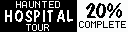
<style>
.page{position:relative;width:128px;height:32px;background:#000000}
.page>*{position:absolute;margin:0}
.t1{font:8px "Terminal";letter-spacing:0.075em;color:#ffffff}
.t2{font:24px "DomCasualBT-Regular";color:#000000}
.t3{font:17.2px "DomCasualBT-Regular";letter-spacing:0.05em;color:#ffffff;scale:1.05 1}
.t4{font:8px "Terminal";color:#ffffff}
.t5{font:8px "Terminal";color:#000000}
</style>
<div class="page">
<p class="t1" style="left:16px;top:1px;width:44px;height:7px">HAUNTED</p>
<p class="t2" style="left:86px;top:3px;width:36px;height:15px">20%</p>
<p class="t3" style="left:5px;top:10px;width:68px;height:12px">HOSPITAL</p>
<p class="t4" style="left:26px;top:24px;width:23px;height:7px">TOUR</p>
<p class="t5" style="left:79px;top:21px;width:47px;height:7px"><span class="t4"><br></span>COMPLETE</p>
</div>
